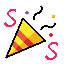
<style>
.page{position:relative;width:64px;height:64px;background:#ffffff}
.page>*{position:absolute;margin:0}
.t1{font:24px "LucidaHandwriting-Italic";color:#f4245f}
</style>
<div class="page">
<p class="t1" style="left:4px;top:9px;width:12px;height:18px">S</p>
<p class="t1" style="left:45px;top:42px;width:13px;height:18px">S</p>
</div>
